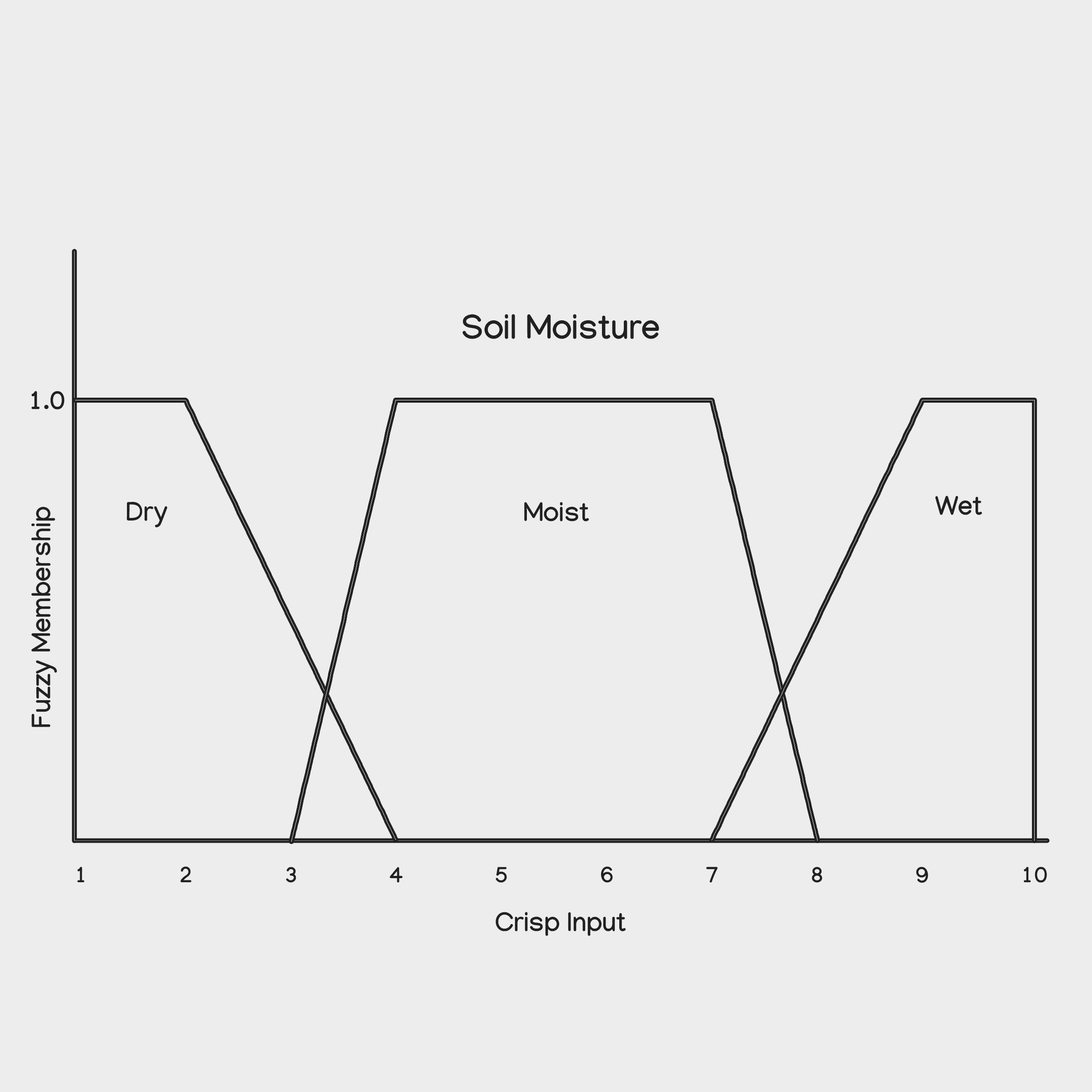
<style>
.page{position:relative;width:1092px;height:1092px;background:#ededed}
.page>*{position:absolute;margin:0}
.t1{font:34.1px "Manjari-Bold";color:#212121}
.t2{font:26.5px "Manjari-Bold";color:#212121}
.t3{font:26.4px "Manjari-Bold";color:#212121}
.t4{font:22.7px "Manjari-Bold";color:#212121}
</style>
<div class="page">
<p class="t1" style="left:462px;top:314px;width:197px;height:25px">Soil Moisture</p>
<p class="t2" style="left:31px;top:391px;width:34px;height:18px">1.0</p>
<p class="t2" style="left:935px;top:495px;width:47px;height:20px">Wet</p>
<p class="t3" style="left:31px;top:507px;width:26px;height:220px;rotate:-90deg">Fuzzy Membership</p>
<p class="t2" style="left:126px;top:502px;width:41px;height:25px">Dry</p>
<p class="t2" style="left:524px;top:502px;width:65px;height:19px">Moist</p>
<p class="t4" style="left:77px;top:866px;width:970px;height:17px">1 2 3 4 5 6 7 8 9 10</p>
<p class="t2" style="left:495px;top:912px;width:131px;height:24px">Crisp Input</p>
</div>
